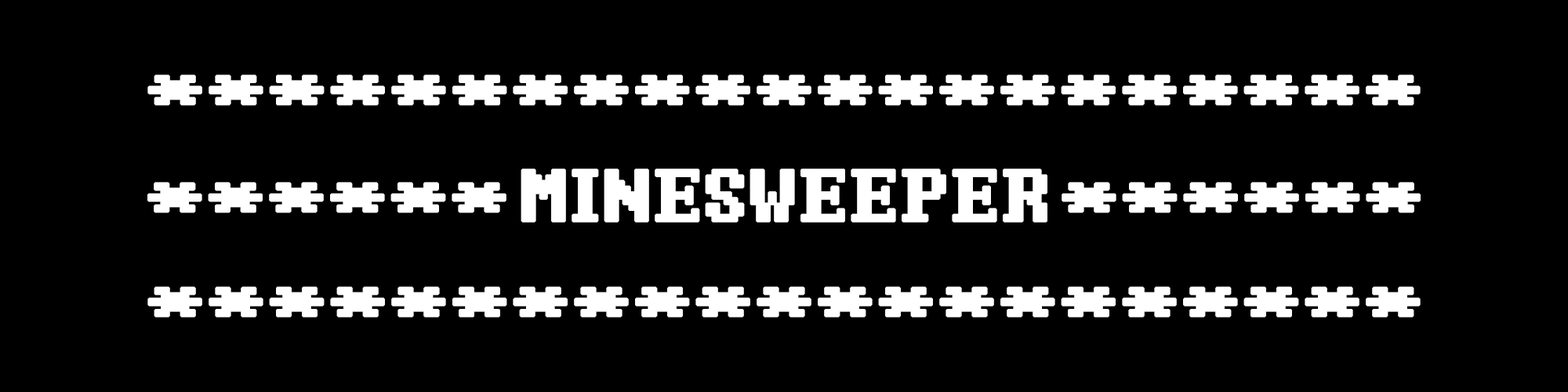
<style>
.page{position:relative;width:1568px;height:392px;background:#000000}
.page>*{position:absolute;margin:0}
.t1{font:88.3px "Windows-Command-Prompt";color:#ffffff;font-weight:bold;scale:1.17 1}
.t2{font:90.2px "Windows-Command-Prompt";color:#ffffff;font-weight:bold;scale:1.06 1}
</style>
<div class="page">
<p class="t1" style="left:147px;top:74px;width:1274px;height:32px">*********************</p>
<p class="t2" style="left:521px;top:169px;width:526px;height:54px">MINESWEEPER</p>
<p class="t1" style="left:147px;top:182px;width:359px;height:31px">******</p>
<p class="t1" style="left:1062px;top:182px;width:359px;height:31px">******</p>
<p class="t1" style="left:147px;top:286px;width:1274px;height:32px">*********************</p>
</div>
